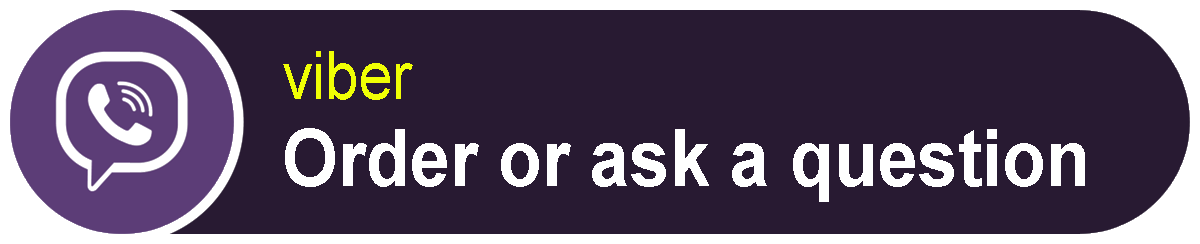
<style>
.page{position:relative;width:1200px;height:244px;background:#281a32}
.page>*{position:absolute;margin:0}
.t1{font:79.2px "Arial-BoldMT";color:#ffffff;scale:0.91 1}
.t2{font:66px "ArialMT";color:#f0ff05;scale:0.91 1}
</style>
<div class="page">
<p class="t1" style="left:283px;top:51px;width:802px;height:151px"><span class="t2">viber<br></span>Order or ask a question</p>
</div>
